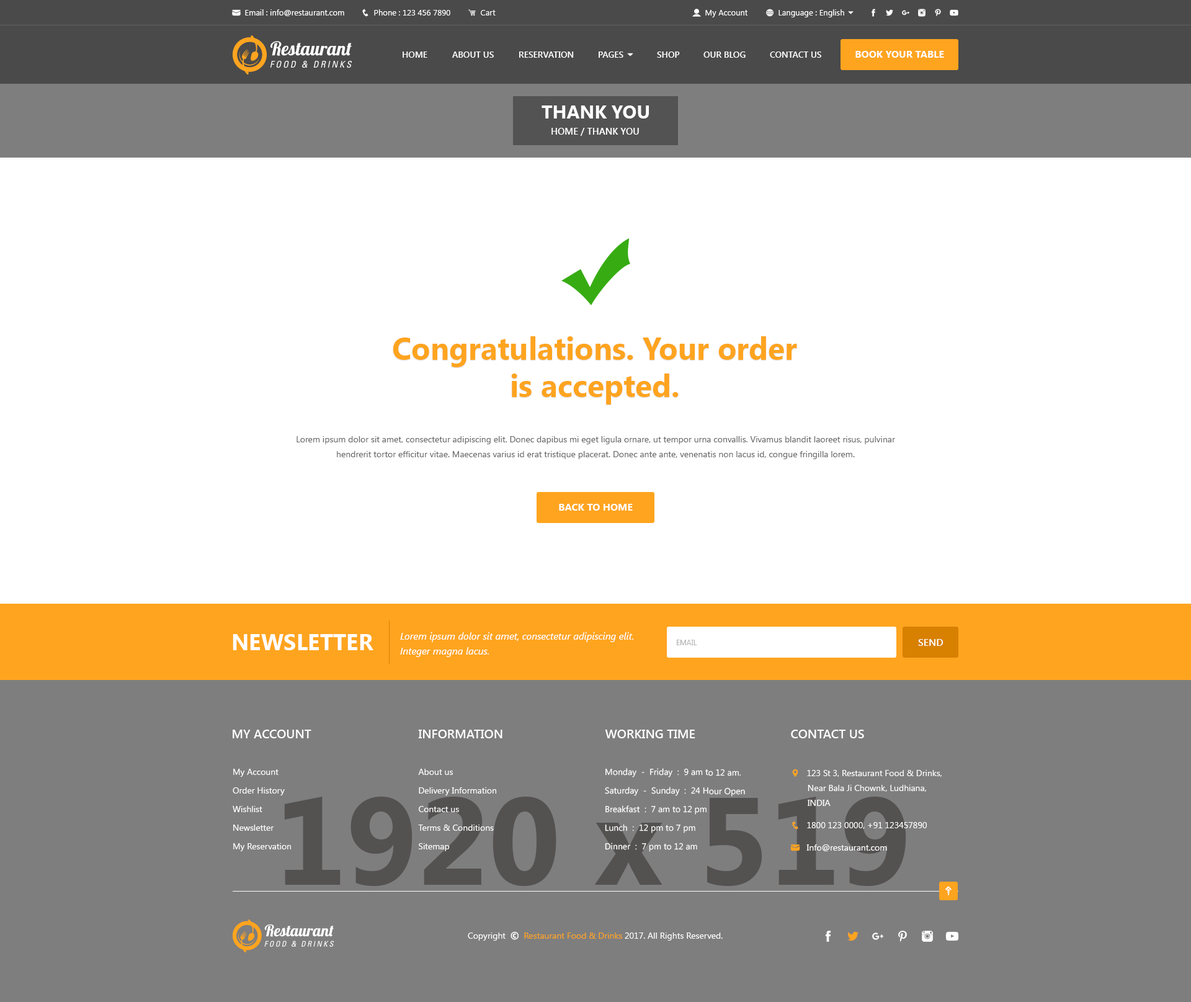
<style>
.page{position:relative;width:1191px;height:1002px;background:#ffffff}
.page>*{position:absolute;margin:0}
.t1{font:8.7px "SegoeUI-SemiBold";color:#ffffff}
.t2{font:9.9px "SegoeUI-Bold";color:#ffffff}
.t3{font:18.6px "SegoeUI-Bold";color:#ffffff}
.t4{font:9.3px "SegoeUI-SemiBold";color:#ffffff}
.t5{font:31px/37.2px "SegoeUI-Bold";color:#ffa41f}
.t6{font:8.7px/14.9px "SegoeUI";color:#686868}
.t7{font:22.3px "SegoeUI-Bold";color:#ffffff}
.t8{font:9.9px/14.9px "SegoeUI-Italic";color:#ffffff}
.t9{font:7.4px "SegoeUI";color:#b2b2b2;text-transform:uppercase}
.t10{font:9.9px "SegoeUI-SemiBold";color:#ffffff}
.t11{font:12.4px "SegoeUI-SemiBold";color:#ffffff}
.t12{font:8.7px/18.6px "SegoeUI";color:#ffffff}
.t13{font:124px "SegoeUI-Bold";color:#545151}
</style>
<div class="page">
<p class="t1" style="left:402px;top:51px;width:25px;height:7px">HOME</p>
<p class="t1" style="left:452px;top:51px;width:42px;height:7px">ABOUT US</p>
<p class="t1" style="left:519px;top:51px;width:55px;height:7px">RESERVATION</p>
<p class="t1" style="left:657px;top:51px;width:23px;height:7px">SHOP</p>
<p class="t1" style="left:703px;top:51px;width:42px;height:7px">OUR BLOG</p>
<p class="t1" style="left:770px;top:51px;width:51px;height:7px">CONTACT US</p>
<p class="t2" style="left:855px;top:51px;width:89px;height:7px">BOOK YOUR TABLE</p>
<p class="t3" style="left:541px;top:105px;width:108px;height:13px">THANK YOU</p>
<p class="t4" style="left:551px;top:128px;width:88px;height:8px">HOME / THANK YOU</p>
<p class="t5" style="left:393px;top:336px;width:404px;height:68px;text-align:center">Congratulations. Your order<br>is accepted.</p>
<p class="t6" style="left:296px;top:436px;width:599px;height:23px;text-align:center">Lorem ipsum dolor sit amet, consectetur adipiscing elit. Donec dapibus mi eget ligula ornare, ut tempor urna convallis. Vivamus blandit laoreet risus, pulvinar hendrerit tortor efficitur vitae. Maecenas varius id erat tristique placerat. Donec ante ante, venenatis non lacus id, congue fringilla lorem.</p>
<p class="t2" style="left:559px;top:504px;width:74px;height:6px">BACK TO HOME</p>
<p class="t7" style="left:233px;top:634px;width:140px;height:16px">NEWSLETTER</p>
<p class="t8" style="left:400px;top:632px;width:233px;height:25px">Lorem ipsum dolor sit amet, consectetur adipiscing elit. Integer magna lacus.</p>
<p class="t9" style="left:677px;top:639px;width:20px;height:6px">Email</p>
<p class="t10" style="left:918px;top:639px;width:25px;height:7px">SEND</p>
<p class="t11" style="left:233px;top:729px;width:78px;height:9px">MY ACCOUNT</p>
<p class="t11" style="left:418px;top:729px;width:84px;height:9px">INFORMATION</p>
<p class="t11" style="left:605px;top:729px;width:90px;height:9px">WORKING TIME</p>
<p class="t11" style="left:791px;top:729px;width:73px;height:9px">CONTACT US</p>
<p class="t12" style="left:233px;top:768px;width:58px;height:83px">My Account<br>Order History<br>Wishlist<br>Newsletter<br>My Reservation</p>
<p class="t12" style="left:418px;top:768px;width:78px;height:83px">About us<br>Delivery Information<br>Contact us<br>Terms &amp; Conditions<br>Sitemap</p>
<p class="t12" style="left:605px;top:768px;width:140px;height:83px">Monday  -  Friday  :  9 am to 12 am.<br>Saturday  -  Sunday  :  24 Hour Open<br>Breakfast  :  7 am to 12 pm<br>Lunch  :  12 pm to 7 pm<br>Dinner  :  7 pm to 12 am</p>
<p class="t13" style="left:284px;top:796px;width:622px;height:90px">1920 x 519</p>
</div>
